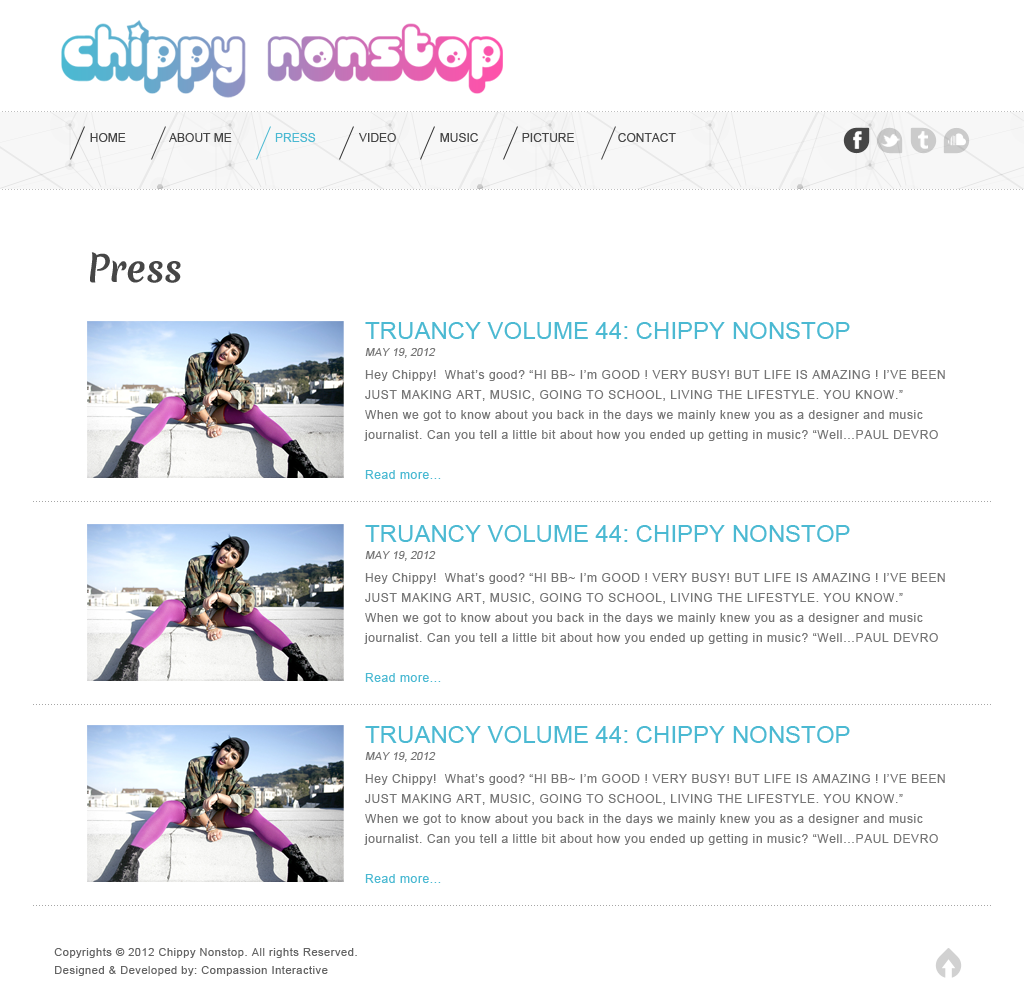
<style>
.page{position:relative;width:1024px;height:1004px;background:#ffffff}
.page>*{position:absolute;margin:0}
.t1{font:12px "ArialMT";color:#464646}
.t2{font:12px "ArialMT";color:#4bb9d2}
.t3{font:36px "MeriendaOne-Regular";color:#464646}
.t4{font:24px "ArialMT";color:#4bb9d2}
.t5{font:11px "ArialMT";color:#767676;font-style:italic}
.t6{font:12px/20px "ArialMT";letter-spacing:0.05em;color:#767676}
.t7{font:12px/20px "ArialMT";letter-spacing:0.05em;color:#4bb9d2}
.t8{font:11px/18px "ArialMT";letter-spacing:0.05em;color:#656565}
</style>
<div class="page">
<p class="t1" style="left:90px;top:133px;width:586px;height:9px">HOME             ABOUT ME             <span class="t2">PRESS             </span>VIDEO             MUSIC             PICTURE             CONTACT</p>
<p class="t3" style="left:90px;top:252px;width:91px;height:31px">Press</p>
<p class="t4" style="left:365px;top:322px;width:485px;height:17px">TRUANCY VOLUME 44: CHIPPY NONSTOP</p>
<p class="t5" style="left:365px;top:348px;width:71px;height:10px">MAY 19, 2012</p>
<p class="t6" style="left:364px;top:370px;width:581px;height:109px">Hey Chippy!  What’s good? “HI BB~ I’m GOOD ! VERY BUSY! BUT LIFE IS AMAZING ! I’VE BEEN JUST MAKING ART, MUSIC, GOING TO SCHOOL, LIVING THE LIFESTYLE. YOU KNOW.”<br>When we got to know about you back in the days we mainly knew you as a designer and music journalist. Can you tell a little bit about how you ended up getting in music? “Well…PAUL DEVRO <br><br><span class="t7">Read more...</span></p>
<p class="t4" style="left:365px;top:525px;width:485px;height:17px">TRUANCY VOLUME 44: CHIPPY NONSTOP</p>
<p class="t5" style="left:365px;top:551px;width:71px;height:10px">MAY 19, 2012</p>
<p class="t6" style="left:364px;top:573px;width:581px;height:109px">Hey Chippy!  What’s good? “HI BB~ I’m GOOD ! VERY BUSY! BUT LIFE IS AMAZING ! I’VE BEEN JUST MAKING ART, MUSIC, GOING TO SCHOOL, LIVING THE LIFESTYLE. YOU KNOW.”<br>When we got to know about you back in the days we mainly knew you as a designer and music journalist. Can you tell a little bit about how you ended up getting in music? “Well…PAUL DEVRO <br><br><span class="t7">Read more...</span></p>
<p class="t4" style="left:365px;top:726px;width:485px;height:17px">TRUANCY VOLUME 44: CHIPPY NONSTOP</p>
<p class="t5" style="left:365px;top:752px;width:71px;height:10px">MAY 19, 2012</p>
<p class="t6" style="left:364px;top:774px;width:581px;height:109px">Hey Chippy!  What’s good? “HI BB~ I’m GOOD ! VERY BUSY! BUT LIFE IS AMAZING ! I’VE BEEN JUST MAKING ART, MUSIC, GOING TO SCHOOL, LIVING THE LIFESTYLE. YOU KNOW.”<br>When we got to know about you back in the days we mainly knew you as a designer and music journalist. Can you tell a little bit about how you ended up getting in music? “Well…PAUL DEVRO <br><br><span class="t7">Read more...</span></p>
<p class="t8" style="left:54px;top:948px;width:303px;height:28px">Copyrights © 2012 Chippy Nonstop. All rights Reserved.<br>Designed &amp; Developed by: Compassion Interactive</p>
</div>
